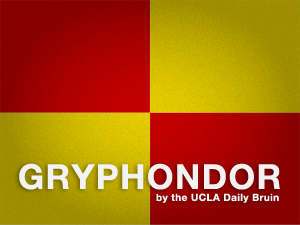
<style>
.page{position:relative;width:300px;height:225px}
.page>*{position:absolute;margin:0}
.t1{font:34.3px "HelveticaNeue-Bold";letter-spacing:0.041em;color:#f2f2f2}
.t2{font:10px "HelveticaNeue-Bold";letter-spacing:0.041em;color:#f2f2f2}
</style>
<div class="page">
<p class="t1" style="left:19px;top:163px;width:261px;height:27px">GRYPHONDOR</p>
<p class="t2" style="left:156px;top:193px;width:123px;height:10px">by the UCLA Daily Bruin</p>
</div>
